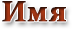
<style>
.page{position:relative;width:72px;height:29px}
.page>*{position:absolute;margin:0}
.t1{font:30px "MinionPro-Bold";font-weight:bold;scale:1.05 1}
</style>
<div class="page">
<p class="t1" style="left:2px;top:1px;width:64px;height:21px">Имя</p>
</div>
